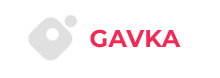
<style>
.page{position:relative;width:220px;height:78px;background:#ffffff}
.page>*{position:absolute;margin:0}
.t1{font:24px "Montserrat-Bold";letter-spacing:0.02em;color:#f42a55}
</style>
<div class="page">
<p class="t1" style="left:90px;top:29px;width:91px;height:19px">GAVKA</p>
</div>
